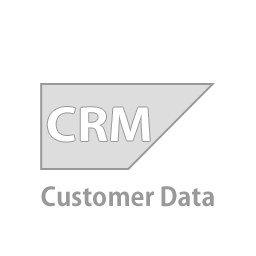
<style>
.page{position:relative;width:256px;height:256px;background:#ffffff}
.page>*{position:absolute;margin:0}
.t1{font:43.5px "AdobeGothicStd-Bold";color:#ffffff;scale:1.18 1}
.t2{font:25.5px "AdobeGothicStd-Bold";color:#999999}
</style>
<div class="page">
<p class="t1" style="left:47px;top:107px;width:103px;height:35px">CRM</p>
<p class="t2" style="left:41px;top:186px;width:173px;height:21px">Customer Data</p>
</div>
